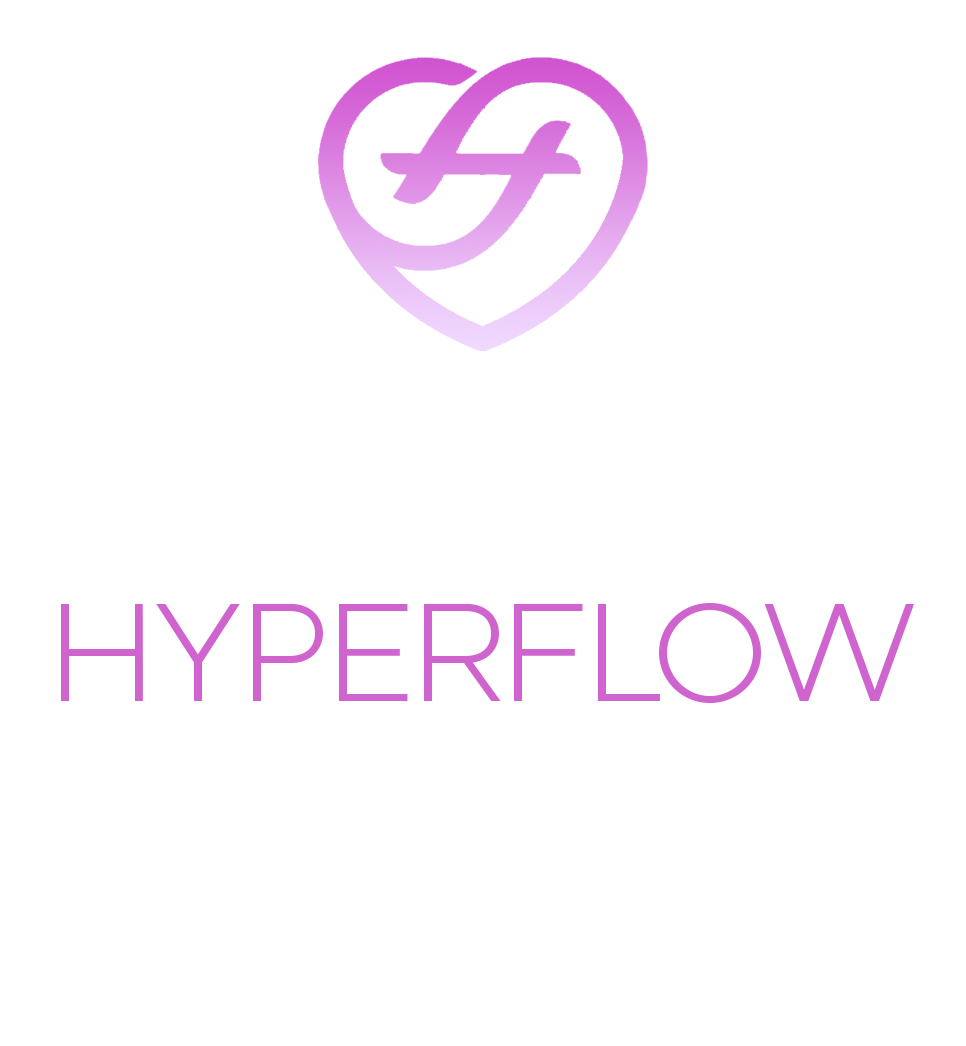
<style>
.page{position:relative;width:966px;height:1046px;background:#ffffff}
.page>*{position:absolute;margin:0}
.t1{font:139px "GigaSans-Light";letter-spacing:-0.05em;color:#d064ce}
</style>
<div class="page">
<p class="t1" style="left:61px;top:602px;width:853px;height:102px">HYPERFLOW</p>
</div>
